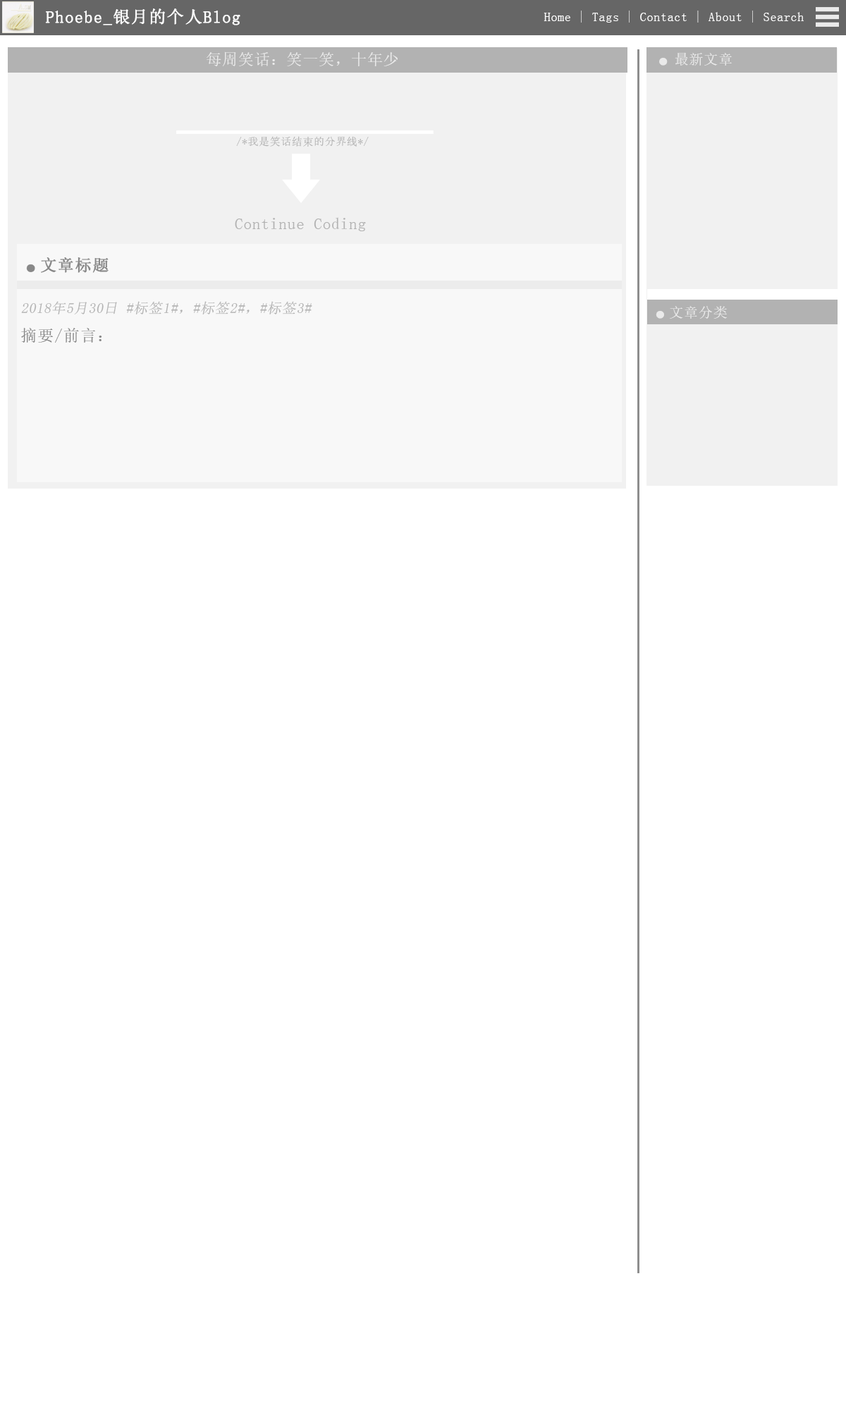
<style>
.page{position:relative;width:846px;height:1410px;background:#ffffff}
.page>*{position:absolute;margin:0}
.t1{font:16.9px "SimSun";letter-spacing:0.04em;color:#ffffff;font-weight:bold}
.t2{font:12.7px "YouYuan";letter-spacing:0.04em;color:#ffffff}
.t3{font:15.5px "SimSun";letter-spacing:0.04em;color:#eaeaea}
.t4{font:14.1px "SimSun";letter-spacing:0.04em;color:#eaeaea}
.t5{font:12.7px "YouYuan";letter-spacing:0.04em;color:#eaeaea}
.t6{font:8.5px "YouYuan";letter-spacing:0.04em;color:#eaeaea}
.t7{font:10.6px "SimSun";letter-spacing:0.04em;color:#b2b2b2}
.t8{font:16.3px "SimSun";letter-spacing:0.04em;color:#b2b2b2}
.t9{font:16.3px "SimSun";letter-spacing:0.04em;color:#888888;font-weight:bold}
.t10{font:8.5px "YouYuan";letter-spacing:0.04em;color:#888888;font-weight:bold}
.t11{font:14.1px "SimSun";letter-spacing:0.04em;color:#b2b2b2;font-style:italic}
.t12{font:16.3px "SimSun";letter-spacing:0.04em;color:#888888}
</style>
<div class="page">
<p class="t1" style="left:45px;top:8px;width:195px;height:17px">Phoebe_银月的个人Blog</p>
<p class="t2" style="left:543px;top:11px;width:261px;height:12px">Home | Tags | Contact | About | Search</p>
<p class="t3" style="left:207px;top:51px;width:191px;height:15px">每周笑话：笑一笑，十年少</p>
<p class="t4" style="left:659px;top:52px;width:73px;height:14px"><span class="t5"> </span><span class="t6">● </span>最新文章</p>
<p class="t7" style="left:236px;top:136px;width:133px;height:11px">/*我是笑话结束的分界线*/</p>
<p class="t8" style="left:235px;top:217px;width:131px;height:14px">Continue Coding</p>
<p class="t9" style="left:26px;top:257px;width:83px;height:16px"><span class="t10">● </span>文章标题</p>
<p class="t11" style="left:21px;top:301px;width:291px;height:13px">2018年5月30日 #标签1#，#标签2#，#标签3#</p>
<p class="t4" style="left:656px;top:306px;width:71px;height:13px"><span class="t6">● </span>文章分类</p>
<p class="t12" style="left:21px;top:328px;width:81px;height:15px">摘要/前言：</p>
</div>
